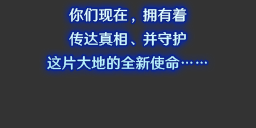
<style>
.page{position:relative;width:256px;height:128px;background:#333333}
.page>*{position:absolute;margin:0}
.t1{font:14.7px/24px "HYWenHei-FEW";letter-spacing:0.005em;color:#cef7ff}
</style>
<div class="page">
<p class="t1" style="left:47px;top:8px;width:160px;height:62px;text-align:center">你们现在，拥有着<br>传达真相、并守护<br>这片大地的全新使命……</p>
</div>
